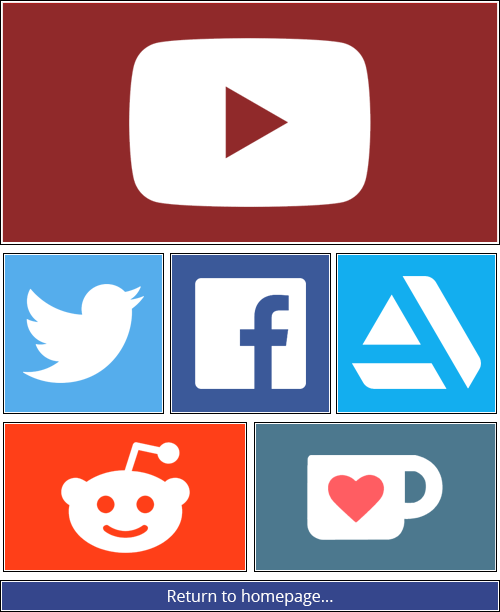
<style>
.page{position:relative;width:500px;height:612px;background:#ffffff}
.page>*{position:absolute;margin:0}
.t1{font:16px "OpenSans-Regular";color:#fefeff}
</style>
<div class="page">
<p class="t1" style="left:168px;top:589px;width:165px;height:17px">Return to homepage...</p>
</div>
